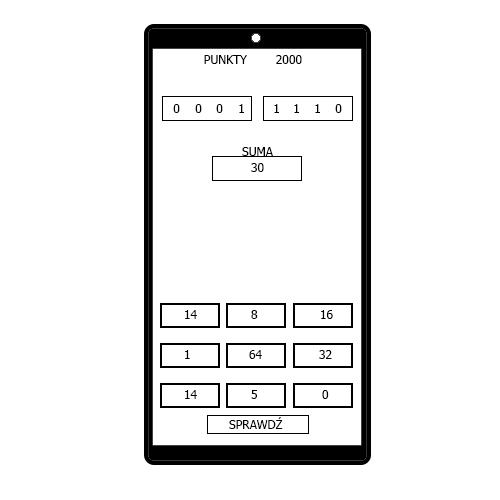
<style>
.page{position:relative;width:500px;height:500px;background:#ffffff}
.page>*{position:absolute;margin:0}
.t1{font:12px "Tahoma";color:#000000}
</style>
<div class="page">
<p class="t1" style="left:204px;top:55px;width:98px;height:9px">PUNKTY 2000</p>
<p class="t1" style="left:173px;top:104px;width:7px;height:9px">0</p>
<p class="t1" style="left:195px;top:104px;width:7px;height:9px">0</p>
<p class="t1" style="left:216px;top:104px;width:7px;height:9px">0</p>
<p class="t1" style="left:239px;top:104px;width:5px;height:9px">1</p>
<p class="t1" style="left:274px;top:104px;width:5px;height:9px">1</p>
<p class="t1" style="left:294px;top:104px;width:5px;height:9px">1</p>
<p class="t1" style="left:315px;top:104px;width:5px;height:9px">1</p>
<p class="t1" style="left:335px;top:104px;width:7px;height:9px">0</p>
<p class="t1" style="left:242px;top:147px;width:31px;height:9px">SUMA</p>
<p class="t1" style="left:251px;top:163px;width:13px;height:9px">30</p>
<p class="t1" style="left:185px;top:310px;width:12px;height:9px">14</p>
<p class="t1" style="left:251px;top:310px;width:7px;height:9px">8</p>
<p class="t1" style="left:321px;top:310px;width:12px;height:9px">16</p>
<p class="t1" style="left:185px;top:350px;width:5px;height:9px">1</p>
<p class="t1" style="left:249px;top:350px;width:13px;height:9px">64</p>
<p class="t1" style="left:319px;top:350px;width:13px;height:9px">32</p>
<p class="t1" style="left:185px;top:390px;width:12px;height:9px">14</p>
<p class="t1" style="left:251px;top:390px;width:6px;height:9px">5</p>
<p class="t1" style="left:322px;top:390px;width:7px;height:9px">0</p>
<p class="t1" style="left:229px;top:417px;width:54px;height:12px">SPRAWDŹ</p>
</div>
